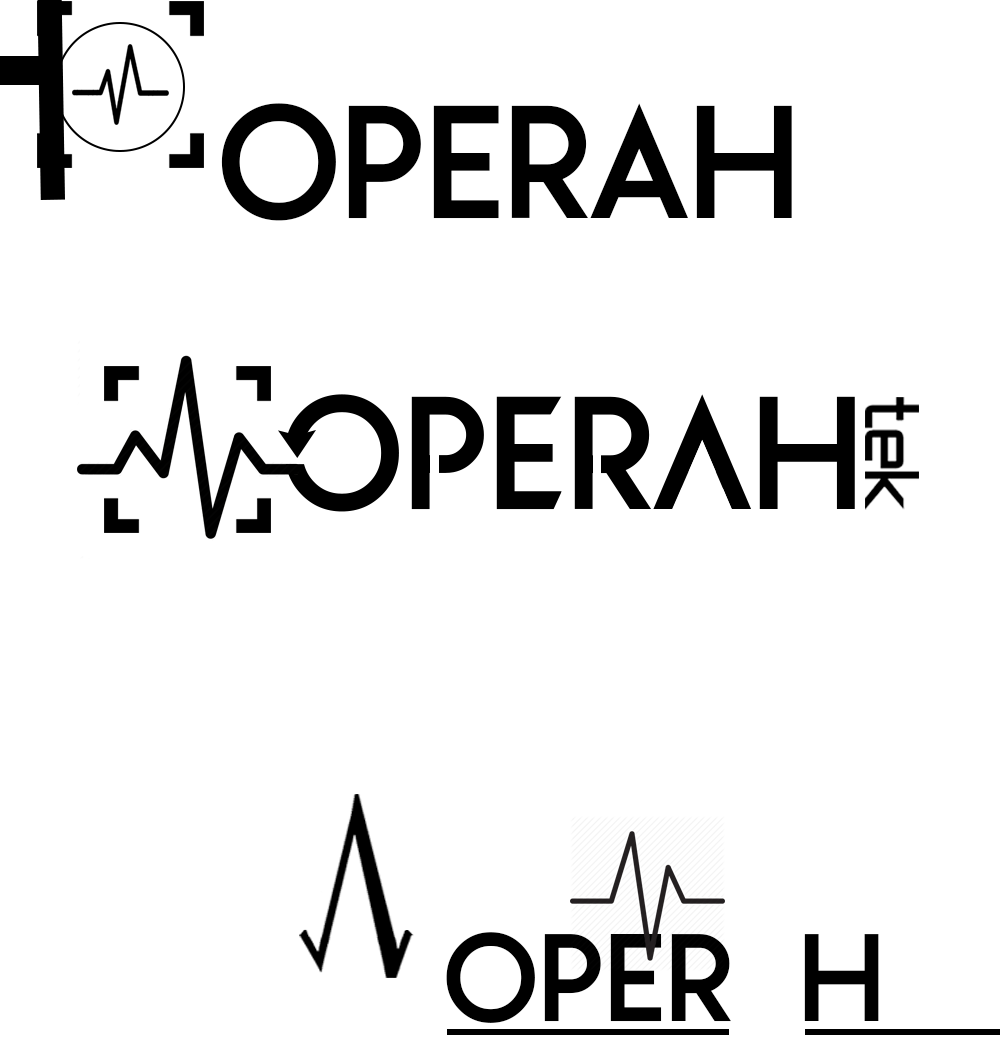
<style>
.page{position:relative;width:1000px;height:1043px;background:#ffffff}
.page>*{position:absolute;margin:0}
.t1{font:151.2px "WatchwordBoldDemo";letter-spacing:-0.01em;color:#000000}
.t2{font:117px "WatchwordBoldDemo";letter-spacing:-0.01em;color:#000000}
</style>
<div class="page">
<p class="t1" style="left:221px;top:103px;width:571px;height:118px">OPERAH</p>
<p class="t2" style="left:446px;top:932px;width:285px;height:91px">OPER</p>
<p class="t2" style="left:804px;top:934px;width:75px;height:87px">H</p>
</div>
